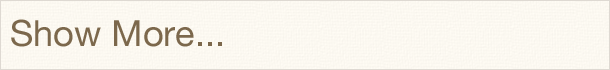
<style>
.page{position:relative;width:610px;height:70px}
.page>*{position:absolute;margin:0}
.t1{font:36px "HelveticaNeue";color:#7c684c}
</style>
<div class="page">
<p class="t1" style="left:11px;top:19px;width:211px;height:28px">Show More...</p>
</div>
